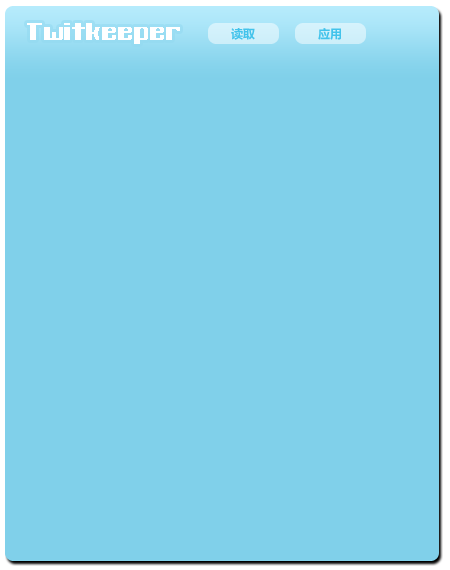
<style>
.page{position:relative;width:450px;height:570px;background:#80d0ea}
.page>*{position:absolute;margin:0}
.t1{font:24px "BlackWolf";color:#ffffff}
.t2{font:12px "MicrosoftYaHei";color:#43c3eb}
</style>
<div class="page">
<p class="t1" style="left:27px;top:23px;width:153px;height:21px">Twitkeeper</p>
<p class="t2" style="left:231px;top:28px;width:24px;height:12px">读取</p>
<p class="t2" style="left:318px;top:28px;width:23px;height:12px">应用</p>
</div>
